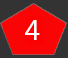
<style>
.page{position:relative;width:68px;height:58px;background:#fa0505}
.page>*{position:absolute;margin:0}
.t1{font:30px "MyriadPro-Regular";color:#ffffff}
</style>
<div class="page">
<p class="t1" style="left:25px;top:20px;width:15px;height:20px">4</p>
</div>
